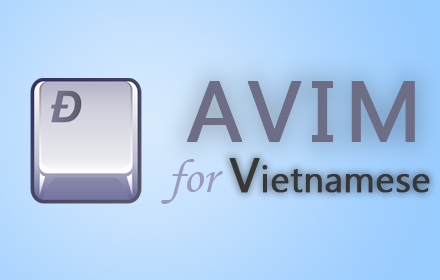
<style>
.page{position:relative;width:440px;height:280px}
.page>*{position:absolute;margin:0}
.t1{font:85px "SegoeUI";letter-spacing:0.1em;color:#6d6d85;font-weight:bold}
.t2{font:48px "MonotypeCorsiva";color:#9b9bc0}
.t3{font:36px "SegoeUI";color:#373737;font-weight:bold}
.t4{font:48px "SegoeUI";color:#373737;font-weight:bold}
</style>
<div class="page">
<p class="t1" style="left:187px;top:81px;width:228px;height:61px">AVIM</p>
<p class="t2" style="left:161px;top:159px;width:62px;height:45px">for</p>
<p class="t3" style="left:229px;top:158px;width:201px;height:35px"><span class="t4">V</span>ietnamese</p>
</div>
